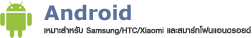
<style>
.page{position:relative;width:252px;height:38px;background:#ffffff}
.page>*{position:absolute;margin:0}
.t1{font:12px "KittithadaMedium65P";color:#3d3d3d;scale:0.96 1}
</style>
<div class="page">
<p class="t1" style="left:44px;top:25px;width:207px;height:10px">เหมาะสำหรับ Samsung/HTC/Xiaomi และสมาร์ทโฟนแอนดรอยด์</p>
</div>
